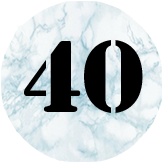
<style>
.page{position:relative;width:164px;height:164px;background:#ffffff}
.page>*{position:absolute;margin:0}
.t1{font:95.5px "StencilStd";color:#000000}
</style>
<div class="page">
<p class="t1" style="left:24px;top:40px;width:119px;height:73px">40</p>
</div>
